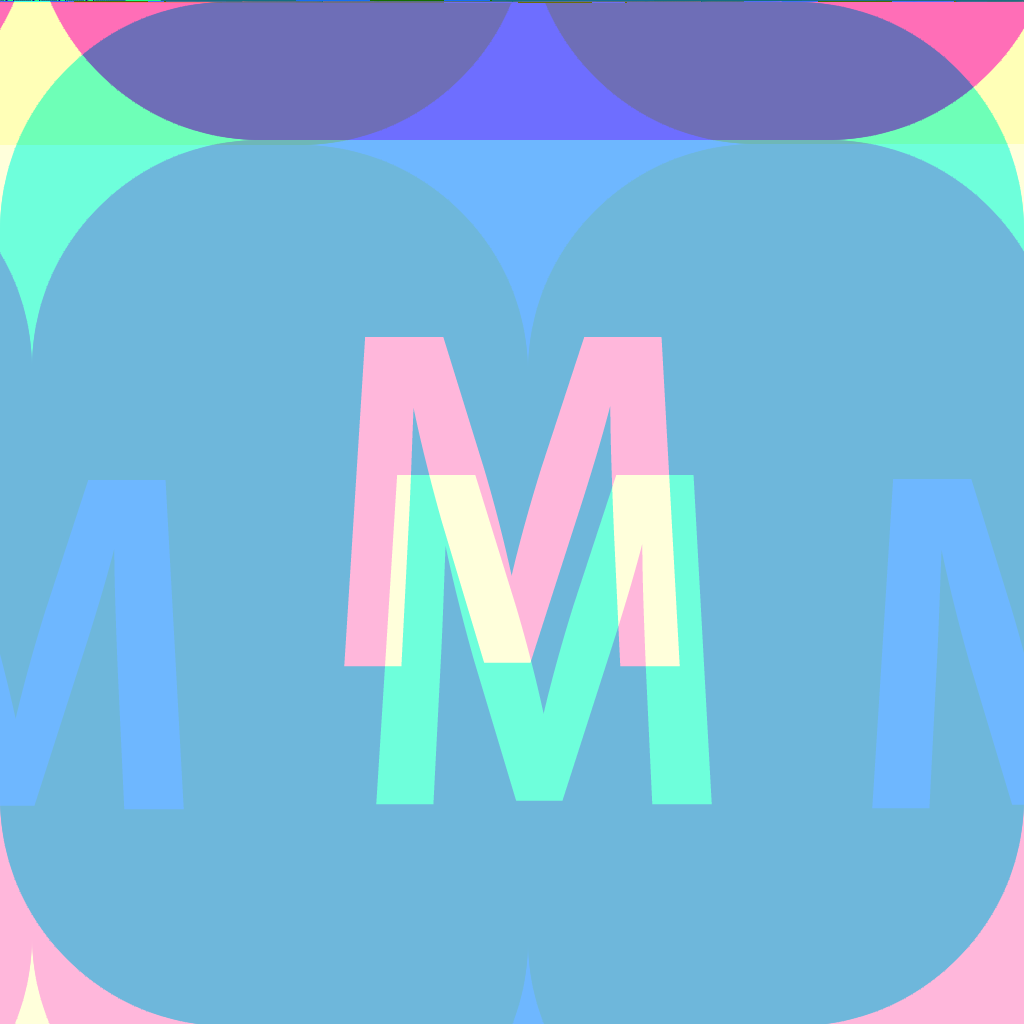
<style>
.page{position:relative;width:1024px;height:1024px;background:#6eb7db}
.page>*{position:absolute;margin:0}
.t1{font:500px "AquaMyriad92-P"}
</style>
<div class="page">
<p class="t1" style="left:344px;top:335px;width:336px;height:330px">M</p>
</div>
